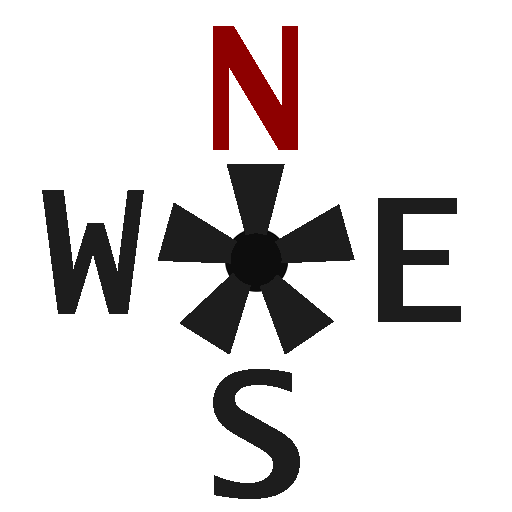
<style>
.page{position:relative;width:512px;height:512px;background:#ffffff}
.page>*{position:absolute;margin:0}
.t1{font:171.1px "LucidaSans-TypewriterBold";color:#8e0000}
.t2{font:427.8px "LucidaSans-TypewriterBold";color:#1d1d1d}
.t3{font:171.1px "LucidaSans-TypewriterBold";color:#1d1d1d}
</style>
<div class="page">
<p class="t1" style="left:213px;top:26px;width:85px;height:124px">N</p>
<p class="t2" style="left:158px;top:164px;width:197px;height:190px">*</p>
<p class="t3" style="left:42px;top:190px;width:102px;height:124px">W</p>
<p class="t3" style="left:378px;top:198px;width:83px;height:124px">E</p>
<p class="t3" style="left:213px;top:369px;width:87px;height:130px">S</p>
</div>
